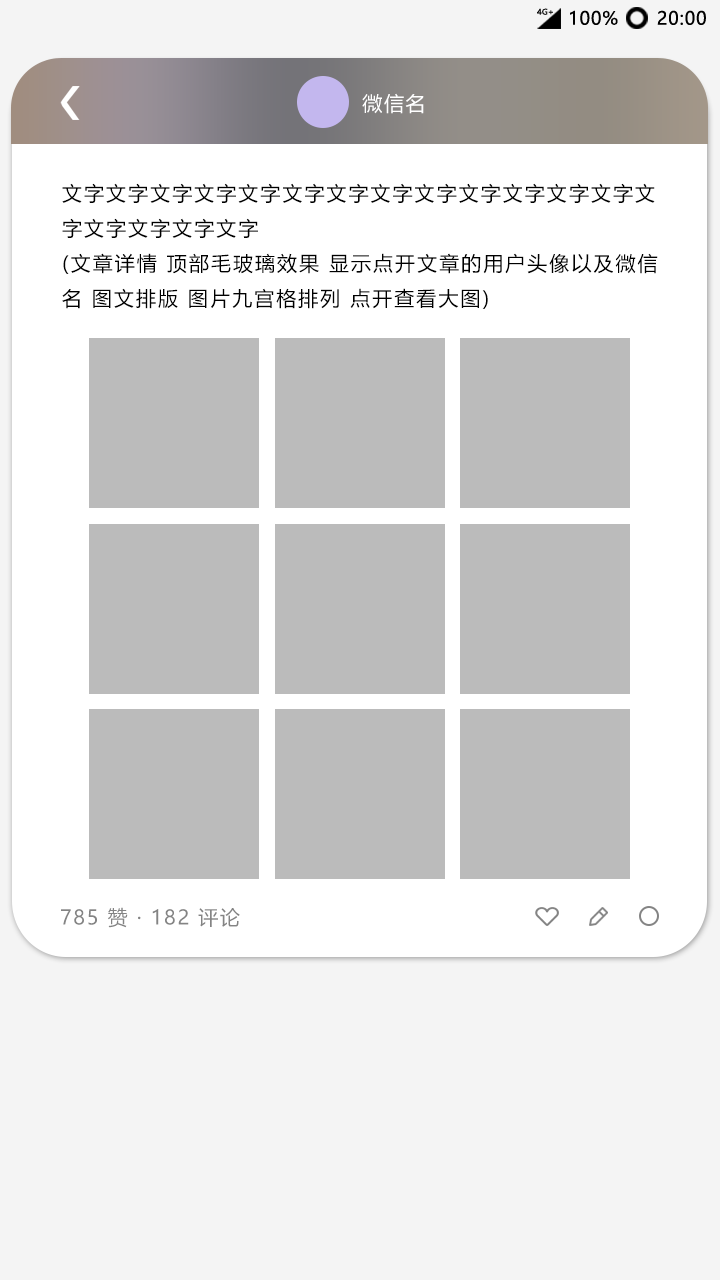
<style>
.page{position:relative;width:720px;height:1280px;background:#f4f4f4}
.page>*{position:absolute;margin:0}
.t1{font:7.8px "MicrosoftYaHei";letter-spacing:0.01em;color:#0e0e0e;scale:1.03 1}
.t2{font:18px "MicrosoftYaHei";letter-spacing:0.05em;color:#000000}
.t3{font:20px "MicrosoftYaHei";letter-spacing:0.08em;color:#ffffff}
.t4{font:20px "MicrosoftYaHei";letter-spacing:0.1em;color:#000000}
.t5{font:20px "MicrosoftYaHei";letter-spacing:0.08em;color:#848484}
</style>
<div class="page">
<p class="t1" style="left:537px;top:8px;width:16px;height:7px">4G+</p>
<p class="t2" style="left:570px;top:10px;width:48px;height:15px">100%</p>
<p class="t2" style="left:657px;top:10px;width:49px;height:15px">20:00</p>
<p class="t3" style="left:362px;top:93px;width:62px;height:21px">微信名</p>
<p class="t4" style="left:62px;top:183px;width:596px;height:126px">文字文字文字文字文字文字文字文字文字文字文字文字文字文<br>字文字文字文字文字<br>(文章详情 顶部毛玻璃效果 显示点开文章的用户头像以及微信<br>名 图文排版 图片九宫格排列 点开查看大图)</p>
<p class="t5" style="left:61px;top:907px;width:179px;height:21px">785 赞 · 182 评论</p>
</div>
